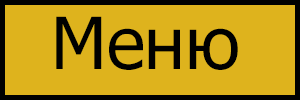
<style>
.page{position:relative;width:300px;height:100px;background:#deb31d}
.page>*{position:absolute;margin:0}
.t1{font:72px "Tahoma";color:#000000}
</style>
<div class="page">
<p class="t1" style="left:56px;top:16px;width:182px;height:54px">Меню</p>
</div>
